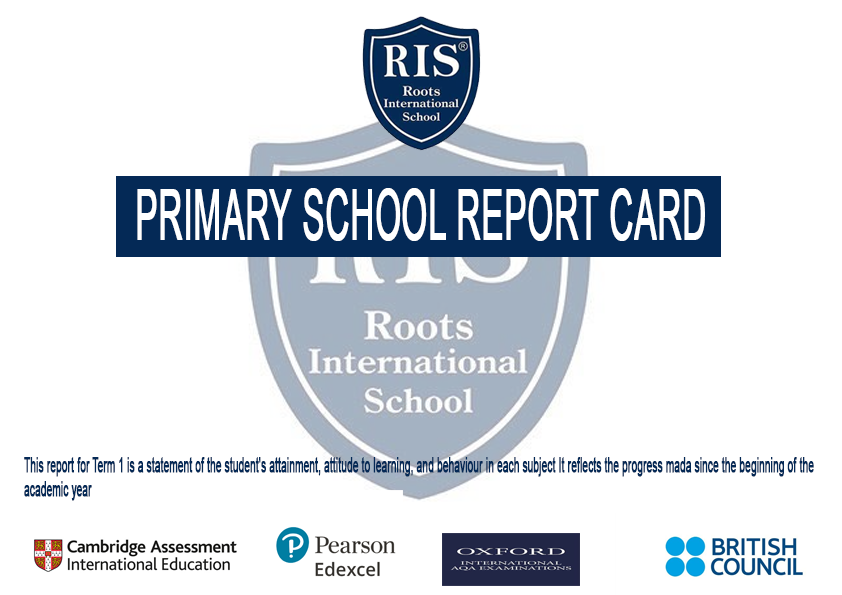
<style>
.page{position:relative;width:842px;height:595px;background:#ffffff}
.page>*{position:absolute;margin:0}
.t1{font:69.3px "ArialMT";color:#ffffff;font-weight:bold;scale:0.48 1}
.t2{font:20.6px "ArialMT";color:#042956;font-weight:bold;scale:0.48 1}
</style>
<div class="page">
<p class="t1" style="left:137px;top:188px;width:568px;height:53px">PRIMARY SCHOOL REPORT CARD</p>
<p class="t2" style="left:24px;top:457px;width:790px;height:44px">This report for Term 1 is a statement of the student's attainment, attitude to learning, and behaviour in each subject It reflects the progress mada since the beginning of the<br>academic year</p>
</div>
